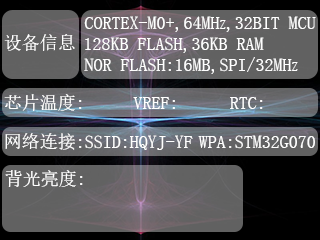
<style>
.page{position:relative;width:320px;height:240px}
.page>*{position:absolute;margin:0}
.t1{font:18px "SimSun";color:#ffffff;font-variant:small-caps}
</style>
<div class="page">
<p class="t1" style="left:84px;top:16px;width:232px;height:16px">CORTEX-M0+,64MHz,32BIT MCU</p>
<p class="t1" style="left:4px;top:34px;width:71px;height:17px">设备信息</p>
<p class="t1" style="left:85px;top:37px;width:179px;height:16px">128KB FLASH,36KB RAM</p>
<p class="t1" style="left:84px;top:57px;width:214px;height:17px">NOR FLASH:16MB,SPI/32MHz</p>
<p class="t1" style="left:4px;top:94px;width:78px;height:17px">芯片温度:</p>
<p class="t1" style="left:133px;top:97px;width:42px;height:12px">VREF:</p>
<p class="t1" style="left:230px;top:97px;width:33px;height:12px">RTC:</p>
<p class="t1" style="left:5px;top:133px;width:77px;height:17px">网络连接:</p>
<p class="t1" style="left:85px;top:135px;width:108px;height:15px">SSID:HQYJ-YF</p>
<p class="t1" style="left:198px;top:135px;width:117px;height:14px">WPA:STM32G070</p>
<p class="t1" style="left:5px;top:170px;width:78px;height:17px">背光亮度:</p>
</div>
